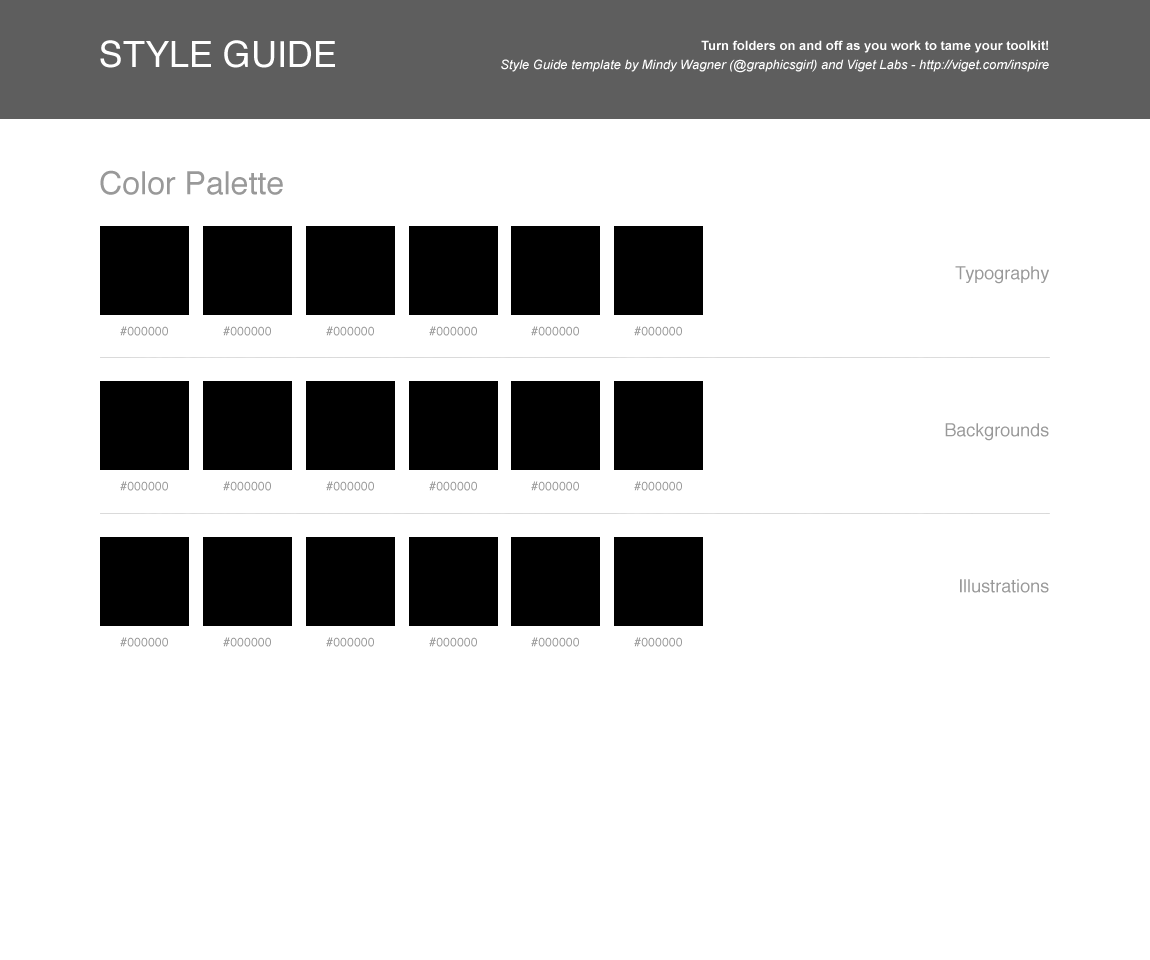
<style>
.page{position:relative;width:1150px;height:960px;background:#ffffff}
.page>*{position:absolute;margin:0}
.t1{font:36px "Helvetica";color:#ffffff}
.t2{font:13px "Arial-BoldMT";color:#ffffff}
.t3{font:13px "Arial-ItalicMT";color:#ffffff}
.t4{font:32px "Helvetica";color:#999999}
.t5{font:18px "Helvetica";color:#999999}
.t6{font:12px "Helvetica";letter-spacing:0.02em;color:#999999}
</style>
<div class="page">
<p class="t1" style="left:100px;top:40px;width:235px;height:28px">STYLE GUIDE</p>
<p class="t2" style="left:701px;top:40px;width:347px;height:13px">Turn folders on and off as you work to tame your toolkit!</p>
<p class="t3" style="left:501px;top:59px;width:548px;height:14px">Style Guide template by Mindy Wagner (@graphicsgirl) and Viget Labs - http://viget.com/inspire</p>
<p class="t4" style="left:100px;top:170px;width:183px;height:25px">Color Palette</p>
<p class="t5" style="left:955px;top:266px;width:94px;height:18px">Typography</p>
<p class="t6" style="left:120px;top:326px;width:48px;height:10px">#000000</p>
<p class="t6" style="left:223px;top:326px;width:48px;height:10px">#000000</p>
<p class="t6" style="left:326px;top:326px;width:48px;height:10px">#000000</p>
<p class="t6" style="left:429px;top:326px;width:48px;height:10px">#000000</p>
<p class="t6" style="left:531px;top:326px;width:48px;height:10px">#000000</p>
<p class="t6" style="left:634px;top:326px;width:48px;height:10px">#000000</p>
<p class="t5" style="left:945px;top:423px;width:104px;height:18px">Backgrounds</p>
<p class="t6" style="left:120px;top:481px;width:48px;height:10px">#000000</p>
<p class="t6" style="left:223px;top:481px;width:48px;height:10px">#000000</p>
<p class="t6" style="left:326px;top:481px;width:48px;height:10px">#000000</p>
<p class="t6" style="left:429px;top:481px;width:48px;height:10px">#000000</p>
<p class="t6" style="left:531px;top:481px;width:48px;height:10px">#000000</p>
<p class="t6" style="left:634px;top:481px;width:48px;height:10px">#000000</p>
<p class="t5" style="left:960px;top:579px;width:89px;height:14px">Illustrations</p>
<p class="t6" style="left:120px;top:637px;width:48px;height:10px">#000000</p>
<p class="t6" style="left:223px;top:637px;width:48px;height:10px">#000000</p>
<p class="t6" style="left:326px;top:637px;width:48px;height:10px">#000000</p>
<p class="t6" style="left:429px;top:637px;width:48px;height:10px">#000000</p>
<p class="t6" style="left:531px;top:637px;width:48px;height:10px">#000000</p>
<p class="t6" style="left:634px;top:637px;width:48px;height:10px">#000000</p>
</div>
